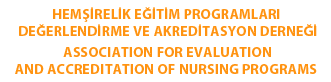
<style>
.page{position:relative;width:331px;height:82px;background:#ffffff}
.page>*{position:absolute;margin:0}
.t1{font:14px/17.2px "MyriadPro-Bold";letter-spacing:0.02em;color:#ff9311}
</style>
<div class="page">
<p class="t1" style="left:19px;top:7px;width:298px;height:29px;text-align:center">HEMŞİRELİK EĞİTİM PROGRAMLARI <br>DEĞERLENDİRME VE AKREDİTASYON DERNEĞİ</p>
<p class="t1" style="left:15px;top:47px;width:302px;height:27px;text-align:center">ASSOCIATION FOR EVALUATION <br>AND ACCREDITATION OF NURSING PROGRAMS</p>
</div>
